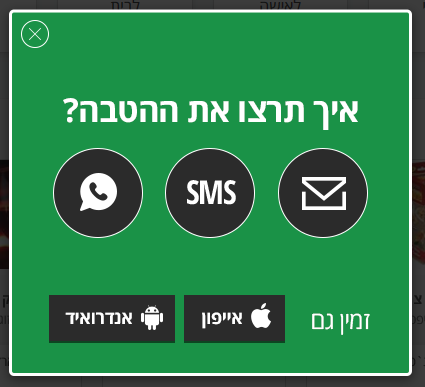
<style>
.page{position:relative;width:425px;height:387px;background:#1a9247}
.page>*{position:absolute;margin:0}
.t1{font:32.9px "OpenSansHebrew-Bold";letter-spacing:-0.025em;color:#ffffff}
.t2{font:32.9px "OpenSansHebrewCondensed-Bold";letter-spacing:-0.025em;color:#ffffff}
.t3{font:18px "OpenSansHebrew-Bold";letter-spacing:-0.025em;color:#ffffff}
.t4{font:24px "OpenSansHebrew-Regular";letter-spacing:-0.025em;color:#ffffff}
</style>
<div class="page">
<p class="t1" style="left:63px;top:98px;width:295px;height:32px">איך תרצו את ההטבה?</p>
<p class="t2" style="left:187px;top:180px;width:49px;height:25px">SMS</p>
<p class="t3" style="left:65px;top:312px;width:67px;height:12px">אנדרואיד</p>
<p class="t3" style="left:202px;top:312px;width:40px;height:17px">אייפון</p>
<p class="t4" style="left:312px;top:313px;width:58px;height:22px">זמין גם</p>
</div>
